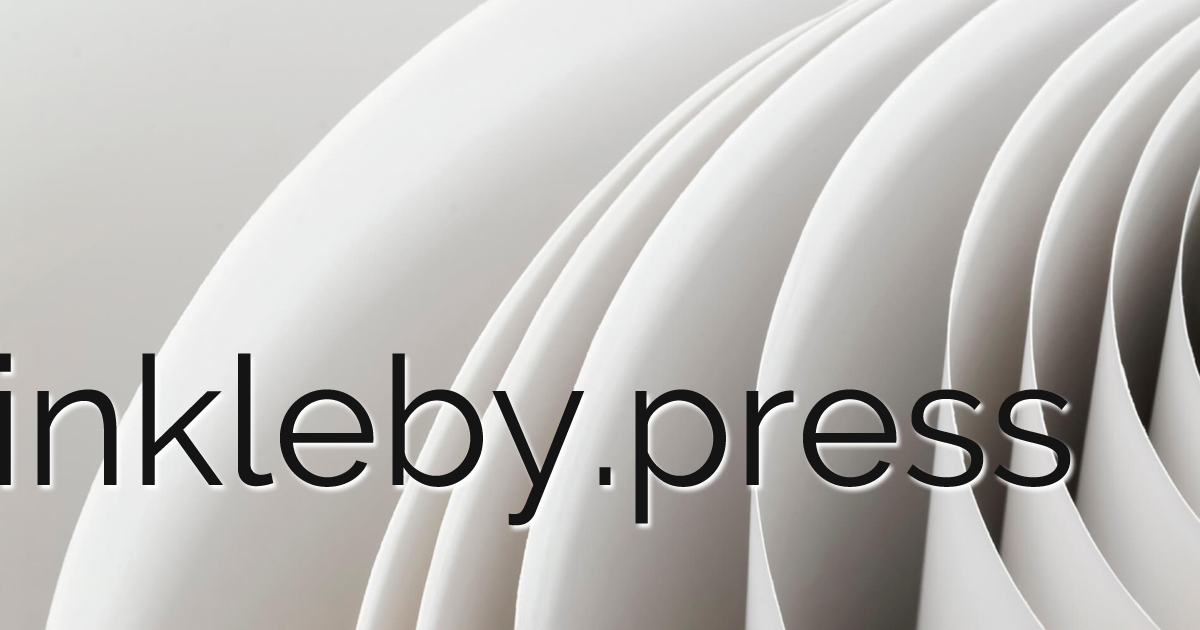
<style>
.page{position:relative;width:1200px;height:630px}
.page>*{position:absolute;margin:0}
.t1{font:180px "Raleway-Regular";color:#141414}
</style>
<div class="page">
<p class="t1" style="left:0px;top:353px;width:1071px;height:173px">inkleby.press</p>
</div>
